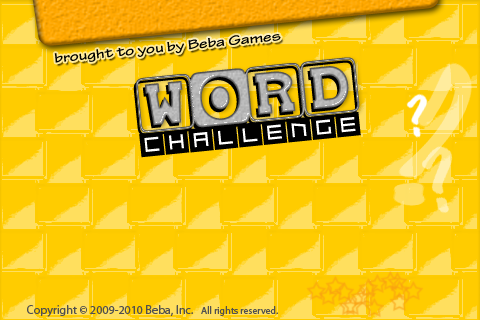
<style>
.page{position:relative;width:480px;height:320px;background:#ffcc00}
.page>*{position:absolute;margin:0}
.t1{font:14px "TektonPro-BoldExt";color:#000000}
.t2{font:46px "babybloc"}
.t3{font:12px "MyriadPro-Regular";color:#505050}
.t4{font:10px "MyriadPro-Regular";color:#515151}
</style>
<div class="page">
<p class="t1" style="left:54px;top:34px;width:227px;height:29px;rotate:-6deg">brought to you by Beba Games</p>
<p class="t2" style="left:135px;top:57px;width:225px;height:76px;rotate:-6deg">WoRD</p>
<p class="t3" style="left:27px;top:305px;width:166px;height:12px">Copyright © 2009-2010 Beba, Inc.</p>
<p class="t4" style="left:201px;top:306px;width:77px;height:10px">All rights reserved.</p>
</div>
